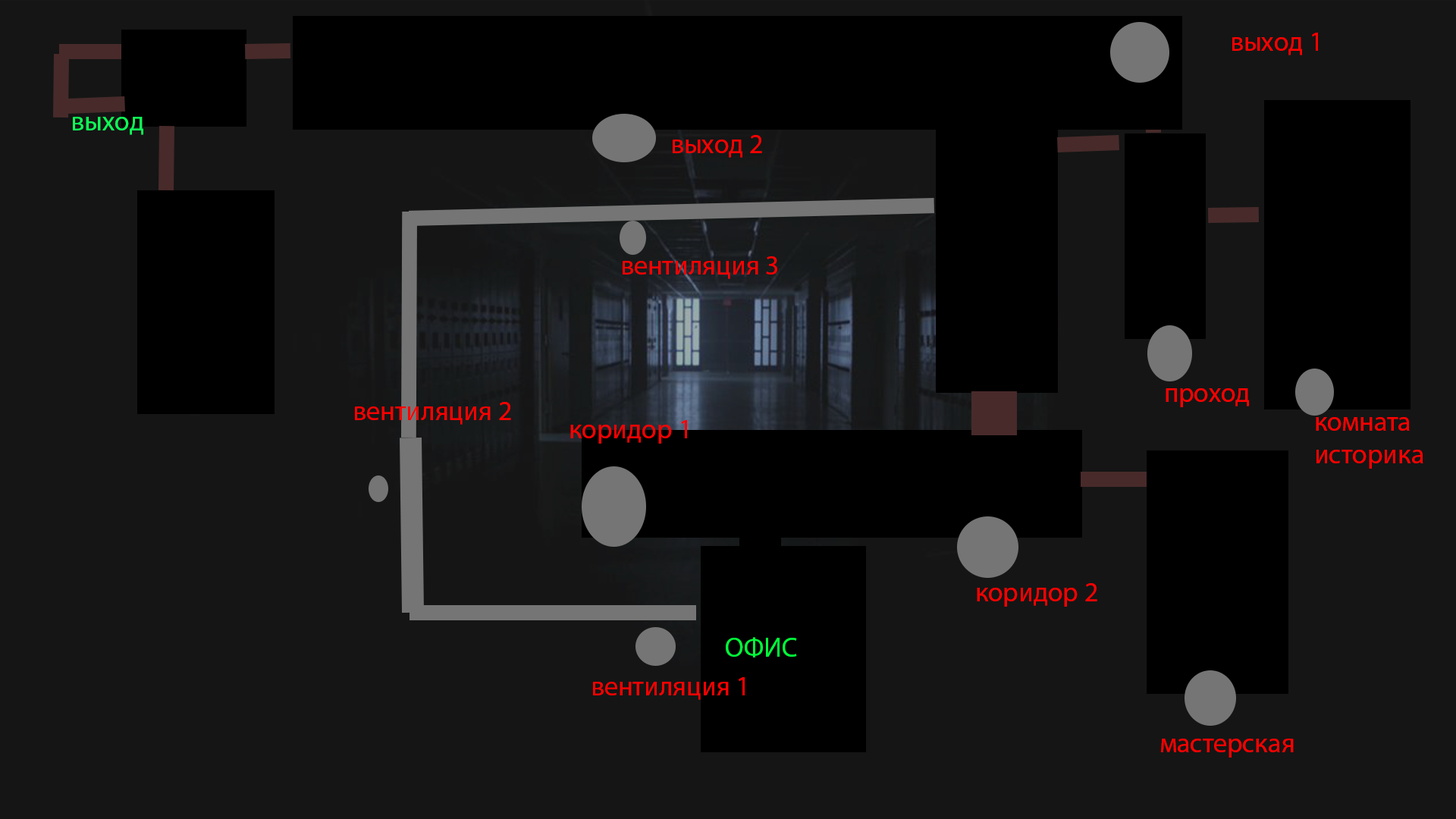
<style>
.page{position:relative;width:1456px;height:819px;background:#151515}
.page>*{position:absolute;margin:0}
.t1{font:27.3px "MyriadPro-Regular";color:#ff0000}
.t2{font:27.3px "MyriadPro-Regular";color:#0dff57}
.t3{font:27.3px "MyriadPro-Regular";color:#00ff3c}
</style>
<div class="page">
<p class="t1" style="left:1232px;top:33px;width:86px;height:22px">выход 1</p>
<p class="t2" style="left:73px;top:117px;width:70px;height:18px">выход</p>
<p class="t1" style="left:673px;top:135px;width:89px;height:23px">выход 2</p>
<p class="t1" style="left:623px;top:256px;width:154px;height:23px">вентиляция 3</p>
<p class="t1" style="left:1166px;top:388px;width:83px;height:19px">проход</p>
<p class="t1" style="left:355px;top:402px;width:156px;height:23px">вентиляция 2</p>
<p class="t1" style="left:570px;top:420px;width:117px;height:24px">коридор 1</p>
<p class="t1" style="left:1316px;top:417px;width:107px;height:52px">комната<br>историка</p>
<p class="t1" style="left:977px;top:583px;width:120px;height:24px">коридор 2</p>
<p class="t3" style="left:726px;top:637px;width:71px;height:20px">ОФИС</p>
<p class="t1" style="left:593px;top:677px;width:152px;height:23px">вентиляция 1</p>
<p class="t1" style="left:1161px;top:739px;width:133px;height:19px">мастерская</p>
</div>
